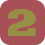
<style>
.page{position:relative;width:45px;height:45px;background:#a75157}
.page>*{position:absolute;margin:0}
.t1{font:50px "Saddlebag-Black";color:#949146}
</style>
<div class="page">
<p class="t1" style="left:8px;top:9px;width:29px;height:27px">2</p>
</div>
